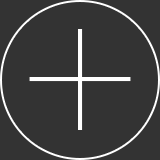
<style>
.page{position:relative;width:160px;height:160px;background:#333333}
.page>*{position:absolute;margin:0}
.t1{font:200px "HelveticaNeue-UltraLight";color:#ffffff}
</style>
<div class="page">
<p class="t1" style="left:29px;top:29px;width:102px;height:101px">+</p>
</div>
